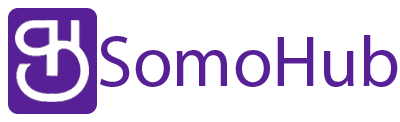
<style>
.page{position:relative;width:400px;height:122px;background:#ffffff}
.page>*{position:absolute;margin:0}
.t1{font:72px "MyriadPro-Regular";color:#572096}
</style>
<div class="page">
<p class="t1" style="left:100px;top:35px;width:298px;height:52px">SomoHub</p>
</div>
